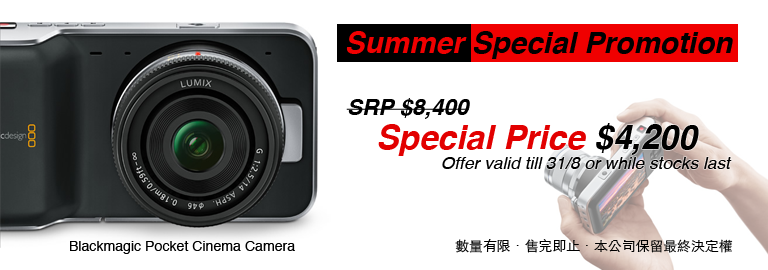
<style>
.page{position:relative;width:768px;height:270px;background:#ffffff}
.page>*{position:absolute;margin:0}
.t1{font:22.6px "Helvetica-BoldOblique";color:#000000}
.t2{font:33.5px "Helvetica-BoldOblique";color:#e20000}
.t3{font:33.5px "Helvetica-BoldOblique";color:#000000}
.t4{font:17.3px "Helvetica-Oblique";color:#000000}
.t5{font:14.1px "Helvetica";color:#000000}
.t6{font:13.9px "STHeitiTC-Light";color:#000000}
</style>
<div class="page">
<p class="t1" style="left:346px;top:98px;width:124px;height:21px">SRP $8,400</p>
<p class="t2" style="left:378px;top:123px;width:321px;height:33px">Special Price <span class="t3">$4,200</span></p>
<p class="t4" style="left:442px;top:157px;width:290px;height:12px">Offer valid till 31/8 or while stocks last</p>
<p class="t5" style="left:70px;top:241px;width:225px;height:13px">Blackmagic Pocket Cinema Camera</p>
<p class="t6" style="left:455px;top:239px;width:278px;height:14px">數量有限．售完即止．本公司保留最終決定權</p>
</div>
